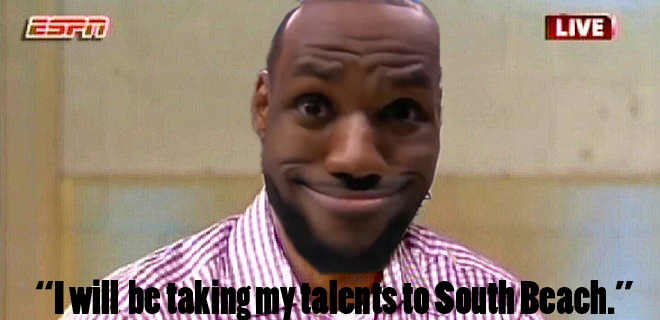
<style>
.page{position:relative;width:660px;height:320px}
.page>*{position:absolute;margin:0}
.t1{font:44.4px "PoplarStd";color:#000000}
</style>
<div class="page">
<p class="t1" style="left:35px;top:279px;width:598px;height:42px">“I will  be taking my talents to South Beach.”</p>
</div>
